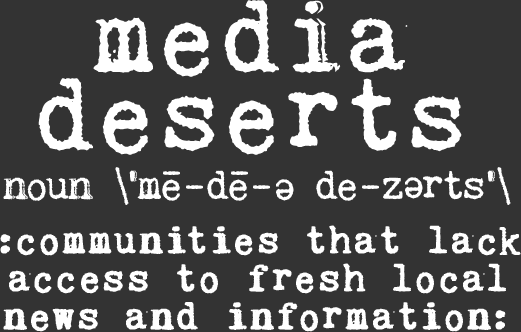
<style>
.page{position:relative;width:521px;height:332px;background:#333333}
.page>*{position:absolute;margin:0}
.t1{font:109px "KingthingsTrypewriter2";color:#ffffff}
.t2{font:43px "KingthingsTrypewriter2";color:#ffffff}
.t3{font:41px/38px "KingthingsTrypewriter2";color:#ffffff;font-weight:bold;scale:0.96 1}
</style>
<div class="page">
<p class="t1" style="left:38px;top:0px;width:424px;height:155px">media deserts</p>
<p class="t2" style="left:163px;top:171px;width:17px;height:4px">-</p>
<p class="t2" style="left:231px;top:171px;width:17px;height:4px">-</p>
<p class="t2" style="left:276px;top:179px;width:18px;height:22px;rotate:180deg">e</p>
<p class="t2" style="left:405px;top:177px;width:18px;height:22px;rotate:180deg">e</p>
<p class="t3" style="left:0px;top:225px;width:521px;height:107px;text-align:center">:communities that lack access to fresh local news and information:</p>
</div>
